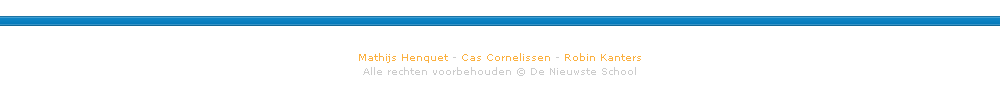
<style>
.page{position:relative;width:1000px;height:108px;background:#ffffff}
.page>*{position:absolute;margin:0}
.t1{font:10px/14px "Verdana";color:#cccccc}
.t2{font:10px/14px "Verdana";color:#fbb03f}
</style>
<div class="page">
<p class="t1" style="left:359px;top:53px;width:282px;height:23px;text-align:center"><span class="t2">Mathijs Henquet </span>- <span class="t2">Cas Cornelissen </span>- <span class="t2">Robin Kanters<br></span>Alle rechten voorbehouden © De Nieuwste School</p>
</div>
